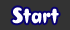
<style>
.page{position:relative;width:70px;height:30px;background:#333333}
.page>*{position:absolute;margin:0}
.t1{font:23px "Yj-MAEHWA--SemiBold";color:#ffffff}
</style>
<div class="page">
<p class="t1" style="left:12px;top:7px;width:47px;height:17px">Start</p>
</div>
